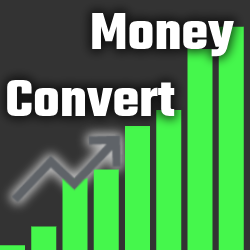
<style>
.page{position:relative;width:250px;height:250px;background:#45f74c}
.page>*{position:absolute;margin:0}
.t1{font:56px "Teko-Bold";color:#ffffff}
</style>
<div class="page">
<p class="t1" style="left:7px;top:13px;width:227px;height:103px">Money<br>Convert</p>
</div>
